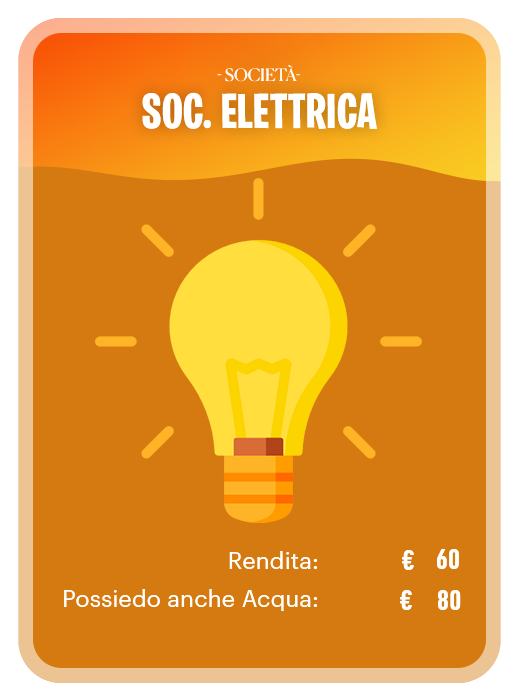
<style>
.page{position:relative;width:527px;height:700px;background:#d47a10}
.page>*{position:absolute;margin:0}
.t1{font:16.5px "Canela-Regular";letter-spacing:0.01em;color:#ffffff;text-transform:uppercase}
.t2{font:49.3px "BurbankBigCondensed-Bold";letter-spacing:0.01em;color:#ffffff}
.t3{font:23.2px "Graphik-Regular";letter-spacing:0.01em;color:#ffffff}
.t4{font:29.4px "D-DINCondensed-Bold";letter-spacing:0.01em;color:#ffffff}
</style>
<div class="page">
<p class="t1" style="left:217px;top:65px;width:83px;height:17px;opacity:0.97">- SOCIETà-</p>
<p class="t2" style="left:142px;top:92px;width:235px;height:37px">SOC. ELETTRICA</p>
<p class="t3" style="left:229px;top:551px;width:89px;height:18px">Rendita:</p>
<p class="t4" style="left:402px;top:550px;width:12px;height:20px">€</p>
<p class="t4" style="left:437px;top:549px;width:22px;height:20px">60</p>
<p class="t3" style="left:64px;top:589px;width:254px;height:22px">Possiedo anche Acqua:</p>
<p class="t4" style="left:400px;top:590px;width:12px;height:20px">€</p>
<p class="t4" style="left:438px;top:590px;width:23px;height:20px">80</p>
</div>
